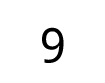
<style>
.page{position:relative;width:105px;height:83px;background:#ffffff}
.page>*{position:absolute;margin:0}
.t1{font:47.9px "DroidSans";color:#000000}
</style>
<div class="page">
<p class="t1" style="left:42px;top:27px;width:22px;height:36px">9</p>
</div>
